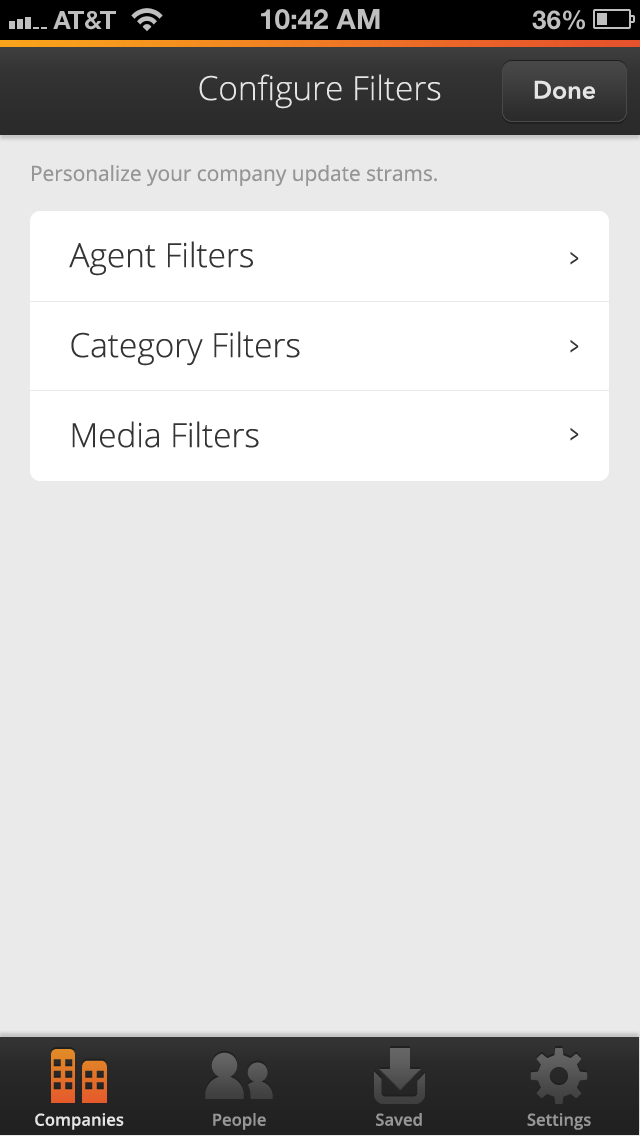
<style>
.page{position:relative;width:640px;height:1136px;background:#eaeaea}
.page>*{position:absolute;margin:0}
.t1{font:33.3px "OpenSans-Light";color:#e5e5e5}
.t2{font:25px "AvenirNext-DemiBold";color:#e5e5e5}
.t3{font:20.8px "OpenSans";color:#969696}
.t4{font:33.3px "OpenSans-Light";color:#343434}
.t5{font:25px "OpenSans";color:#343434;scale:0.64 1}
.t6{font:16.7px "OpenSans-Semibold";color:#e5e5e5}
.t7{font:16.7px "OpenSans-Semibold";color:#969696}
</style>
<div class="page">
<p class="t1" style="left:199px;top:74px;width:242px;height:35px">Configure Filters</p>
<p class="t2" style="left:534px;top:80px;width:61px;height:19px">Done</p>
<p class="t3" style="left:32px;top:165px;width:405px;height:21px">Personalize your company update strams.</p>
<p class="t4" style="left:69px;top:241px;width:184px;height:35px">Agent Filters</p>
<p class="t5" style="left:570px;top:252px;width:9px;height:13px">&gt;</p>
<p class="t4" style="left:71px;top:331px;width:229px;height:35px">Category Filters</p>
<p class="t5" style="left:570px;top:340px;width:9px;height:13px">&gt;</p>
<p class="t4" style="left:72px;top:421px;width:187px;height:27px">Media Filters</p>
<p class="t5" style="left:570px;top:428px;width:9px;height:13px">&gt;</p>
<p class="t6" style="left:35px;top:1113px;width:89px;height:17px">Companies</p>
<p class="t7" style="left:213px;top:1113px;width:53px;height:17px">People</p>
<p class="t7" style="left:376px;top:1113px;width:46px;height:13px">Saved</p>
<p class="t7" style="left:527px;top:1113px;width:64px;height:17px">Settings</p>
</div>
